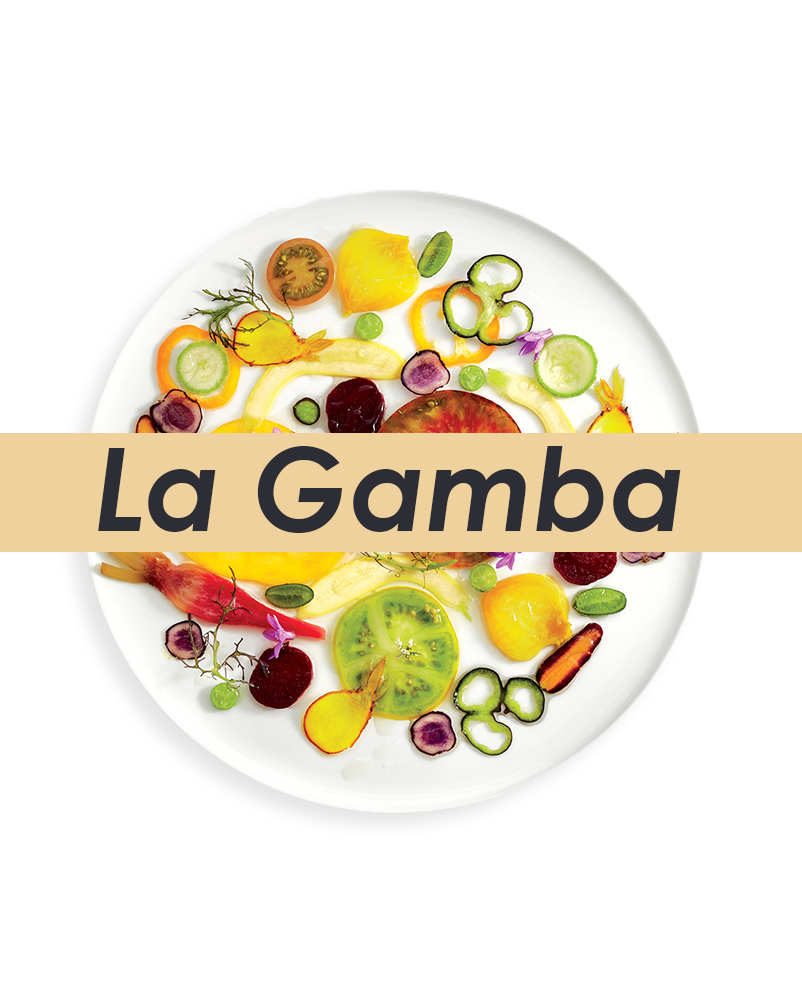
<style>
.page{position:relative;width:802px;height:1003px;background:#ffffff}
.page>*{position:absolute;margin:0}
.t1{font:115px "CenturyGothic-BoldItalic";color:#2d2e35}
</style>
<div class="page">
<p class="t1" style="left:98px;top:446px;width:583px;height:87px">La Gamba</p>
</div>
